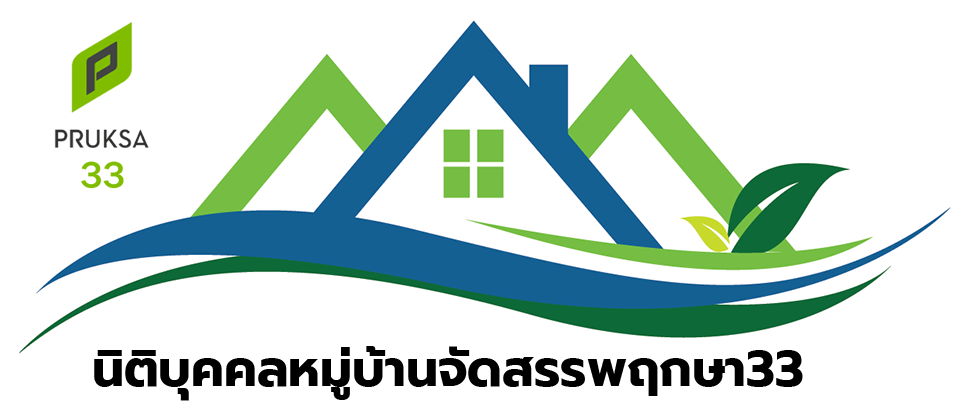
<style>
.page{position:relative;width:966px;height:415px;background:#ffffff}
.page>*{position:absolute;margin:0}
.t1{font:50px "Prompt-Bold";color:#000000}
</style>
<div class="page">
<p class="t1" style="left:94px;top:346px;width:709px;height:55px">นิติบุคคลหมู่บ้านจัดสรรพฤกษา33</p>
</div>
